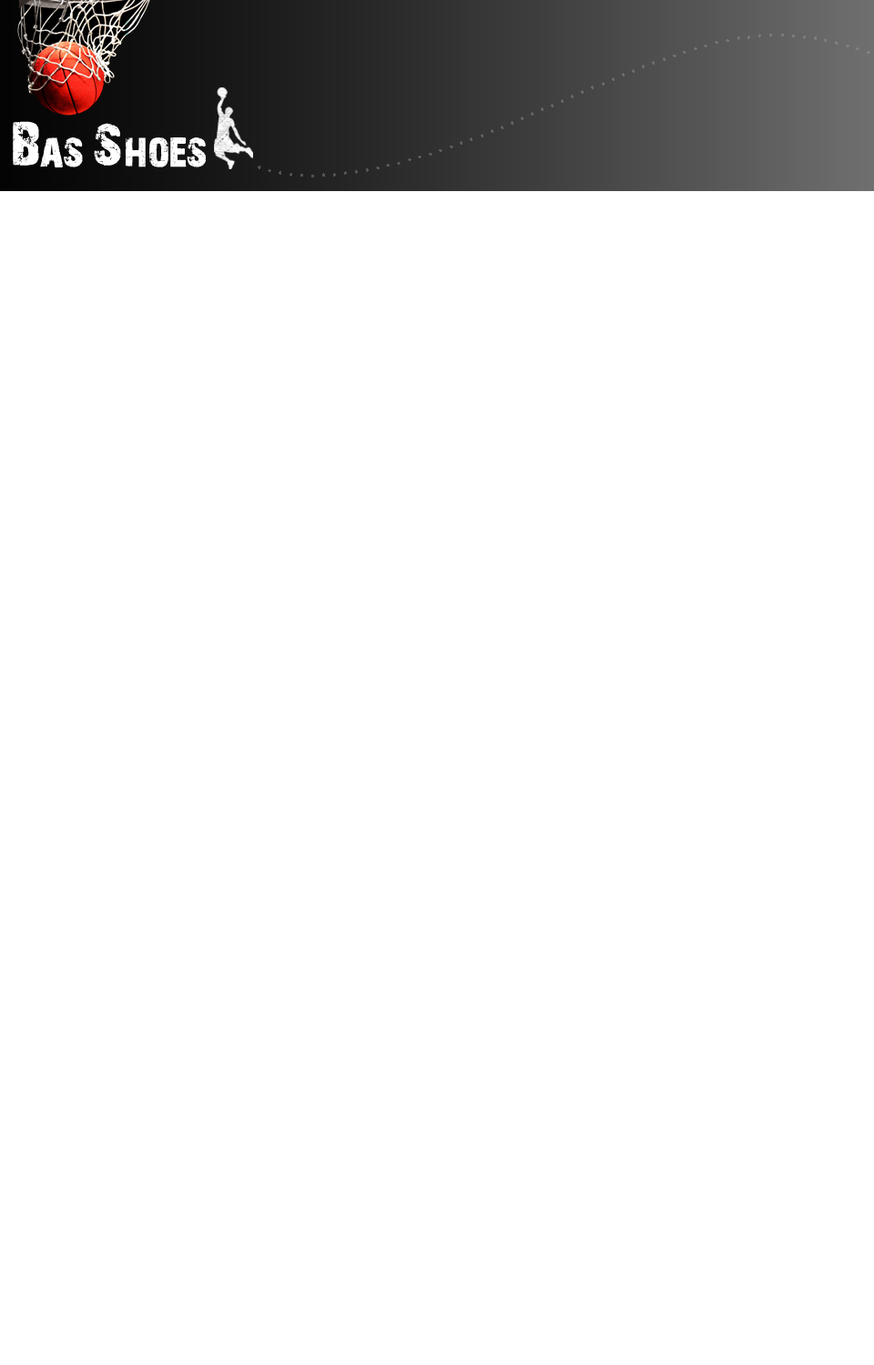
<style>
.page{position:relative;width:874px;height:1365px;background:#ffffff}
.page>*{position:absolute;margin:0}
.t1{font:43.5px "28-Days-Later-Regular";color:#ffffff}
.t2{font:56.9px "28-Days-Later-Regular";color:#ffffff}
</style>
<div class="page">
<p class="t1" style="left:13px;top:121px;width:193px;height:46px"><span class="t2">B</span>as <span class="t2">S</span>hoes</p>
</div>
